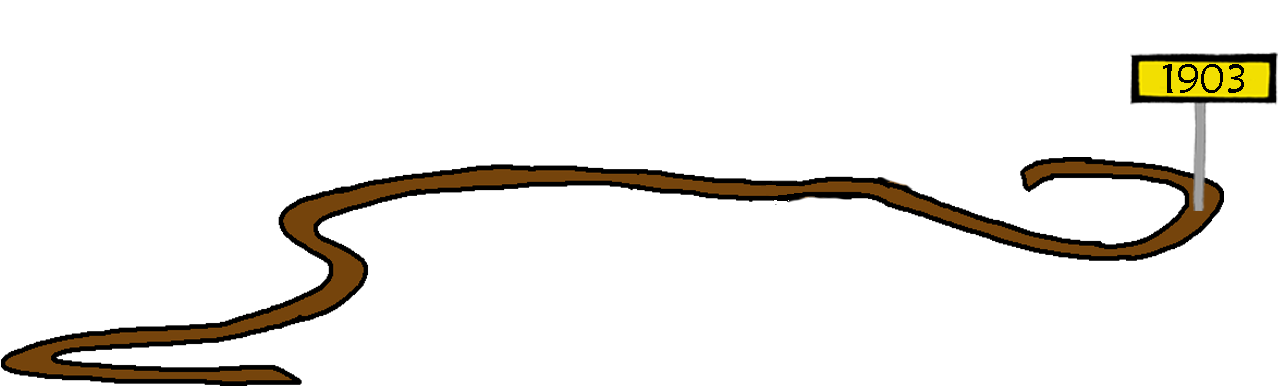
<style>
.page{position:relative;width:1278px;height:386px;background:#ffffff}
.page>*{position:absolute;margin:0}
.t1{font:41.7px "MaiandraGD-Regular";color:#000000}
</style>
<div class="page">
<p class="t1" style="left:1163px;top:64px;width:81px;height:29px">1903</p>
</div>
